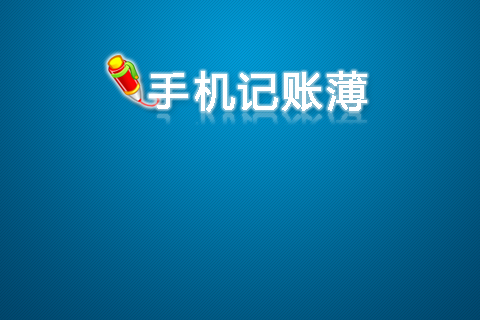
<style>
.page{position:relative;width:480px;height:320px}
.page>*{position:absolute;margin:0}
.t1{font:40.2px "MicrosoftYaHei";letter-spacing:0.08em;color:#ffffff;font-weight:bold}
</style>
<div class="page">
<p class="t1" style="left:149px;top:71px;width:218px;height:41px">手机记账薄</p>
</div>
